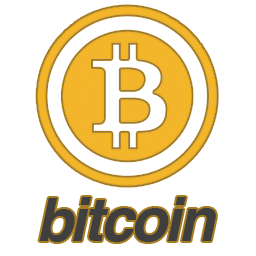
<style>
.page{position:relative;width:256px;height:256px;background:#ffffff}
.page>*{position:absolute;margin:0}
.t1{font:60px "Helvetica-BoldOblique";letter-spacing:-0.05em;color:#3f3f3f}
</style>
<div class="page">
<p class="t1" style="left:39px;top:197px;width:177px;height:45px">bitcoin</p>
</div>
